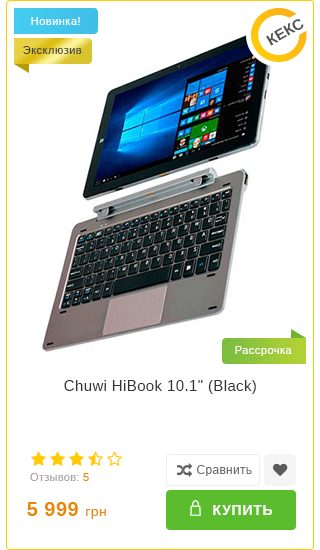
<style>
.page{position:relative;width:320px;height:550px;background:#ffffff}
.page>*{position:absolute;margin:0}
.t1{font:11px "Arimo";letter-spacing:0.045em;color:#ffffff}
.t2{font:11px "Arimo";letter-spacing:0.045em;color:#454545}
.t3{font:15px "Arimo";letter-spacing:0.025em;color:#333333}
.t4{font:11px "Arimo";letter-spacing:0.025em;color:#a3a3a3}
.t5{font:11px "Arimo";letter-spacing:0.025em;color:#e88800}
.t6{font:12px "Arimo";letter-spacing:0.025em;color:#707070}
.t7{font:20px "Arimo-Bold";letter-spacing:0.025em;color:#e88800}
.t8{font:14px "Arimo";letter-spacing:0.025em;color:#e88800}
.t9{font:14px "Arimo-Bold";letter-spacing:0.05em;color:#ffffff}
</style>
<div class="page">
<p class="t1" style="left:31px;top:17px;width:49px;height:8px">Новинка!</p>
<p class="t2" style="left:23px;top:46px;width:59px;height:8px">Эксклюзив</p>
<p class="t1" style="left:235px;top:346px;width:57px;height:10px">Рассрочка</p>
<p class="t3" style="left:64px;top:380px;width:192px;height:14px">Chuwi HiBook 10.1" (Black)</p>
<p class="t4" style="left:30px;top:473px;width:59px;height:8px">Отзывов: <span class="t5">5</span></p>
<p class="t6" style="left:197px;top:465px;width:55px;height:11px">Сравнить</p>
<p class="t7" style="left:27px;top:502px;width:79px;height:17px">5 999 <span class="t8">грн</span></p>
<p class="t9" style="left:213px;top:505px;width:60px;height:10px">КУПИТЬ</p>
</div>
